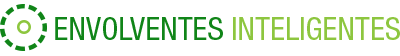
<style>
.page{position:relative;width:400px;height:56px;background:#ffffff}
.page>*{position:absolute;margin:0}
.t1{font:32px "HelveticaNeueLTStd-Cn";color:#8dc63f;text-transform:uppercase}
.t2{font:32px "HelveticaNeueLTStd-Cn";color:#108518;text-transform:uppercase}
</style>
<div class="page">
<p class="t1" style="left:55px;top:17px;width:345px;height:23px"><span class="t2">Envolventes </span>Inteligentes</p>
</div>
